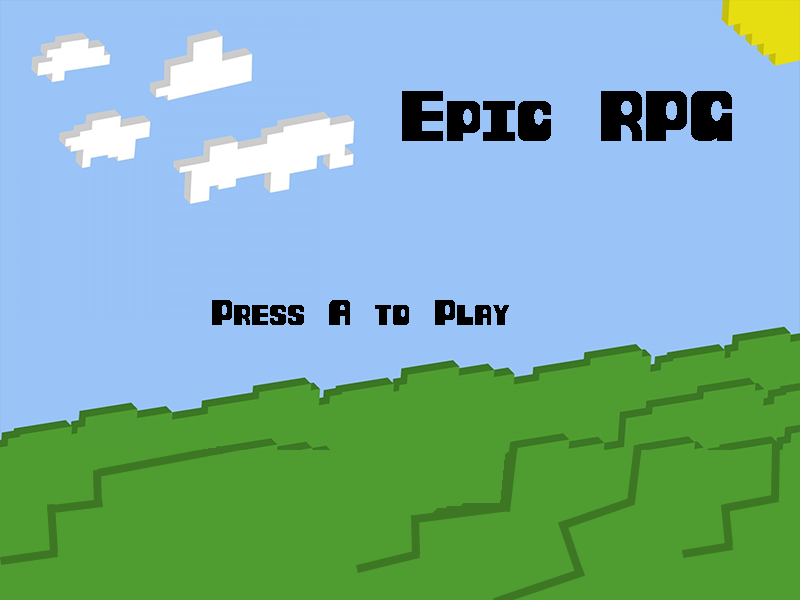
<style>
.page{position:relative;width:800px;height:600px;background:#9ac3f7}
.page>*{position:absolute;margin:0}
.t1{font:72px "DuckHunt";color:#000000}
.t2{font:36px "DuckHunt";color:#000000}
</style>
<div class="page">
<p class="t1" style="left:402px;top:91px;width:330px;height:50px">Epic RPG</p>
<p class="t2" style="left:212px;top:300px;width:297px;height:25px">Press A to Play</p>
</div>
